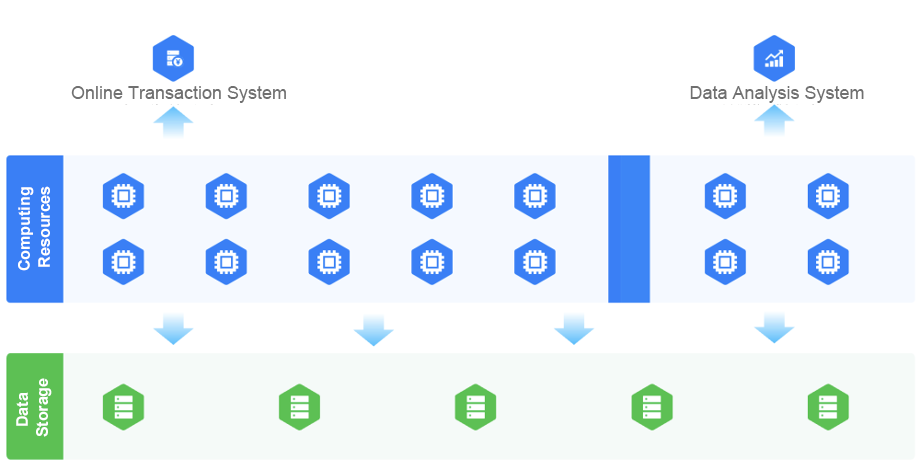
<style>
.page{position:relative;width:920px;height:470px;background:#ffffff}
.page>*{position:absolute;margin:0}
.t1{font:18px "ArialMT";color:#707070}
.t2{font:16px/20px "Arial-BoldMT";color:#ffffff}
</style>
<div class="page">
<p class="t1" style="left:71px;top:86px;width:215px;height:17px">Online Transaction System</p>
<p class="t1" style="left:690px;top:86px;width:174px;height:17px">Data Analysis System</p>
<p class="t2" style="left:18px;top:186px;width:32px;height:85px;text-align:center;rotate:-90deg">Computing <br>Resources</p>
<p class="t2" style="left:16px;top:378px;width:36px;height:59px;text-align:center;rotate:-90deg">Data <br>Storage</p>
</div>
